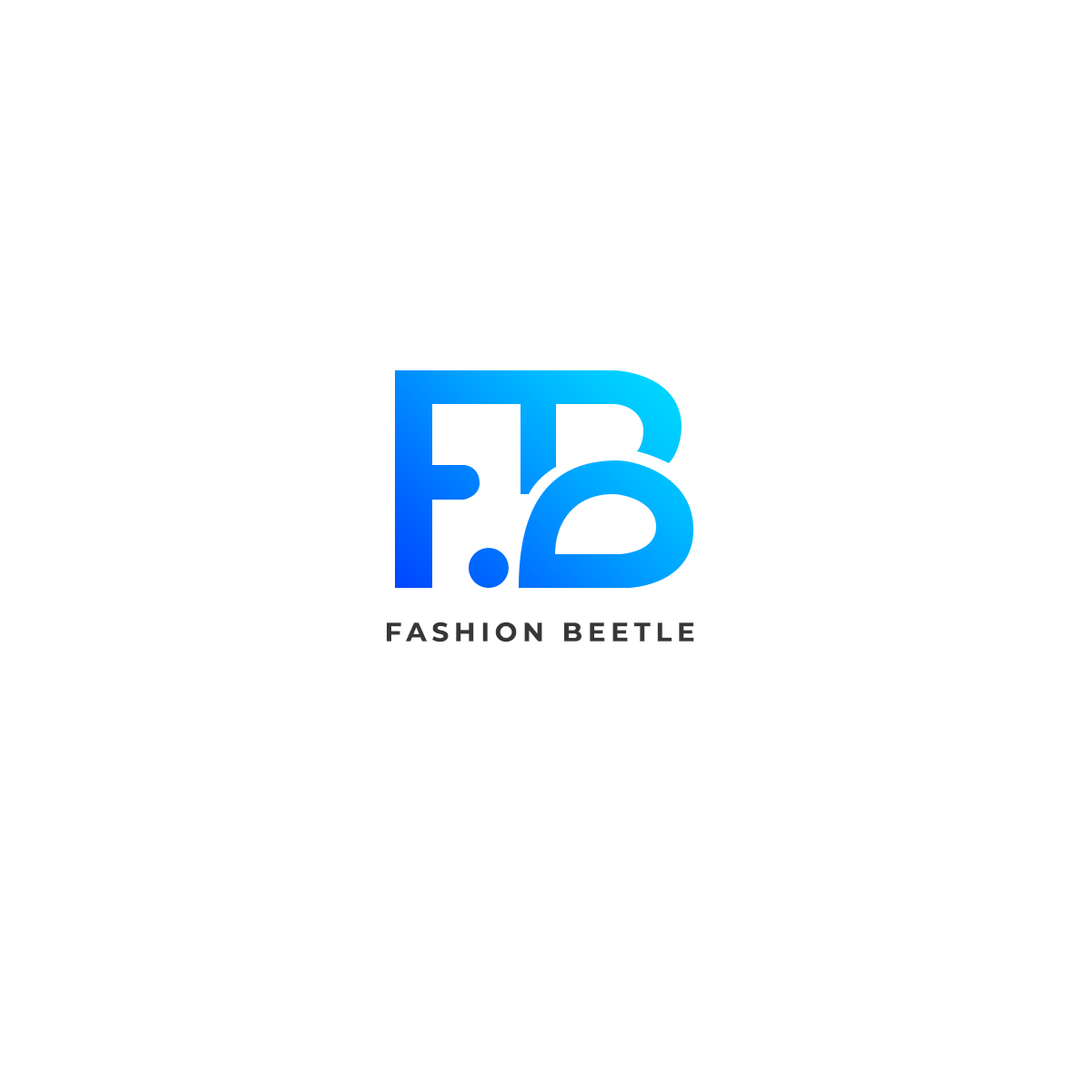
<style>
.page{position:relative;width:1092px;height:1092px;background:#ffffff}
.page>*{position:absolute;margin:0}
.t1{font:26.5px "Montserrat-Bold";letter-spacing:0.2em;color:#383637}
</style>
<div class="page">
<p class="t1" style="left:387px;top:622px;width:307px;height:20px">FASHION BEETLE</p>
</div>
